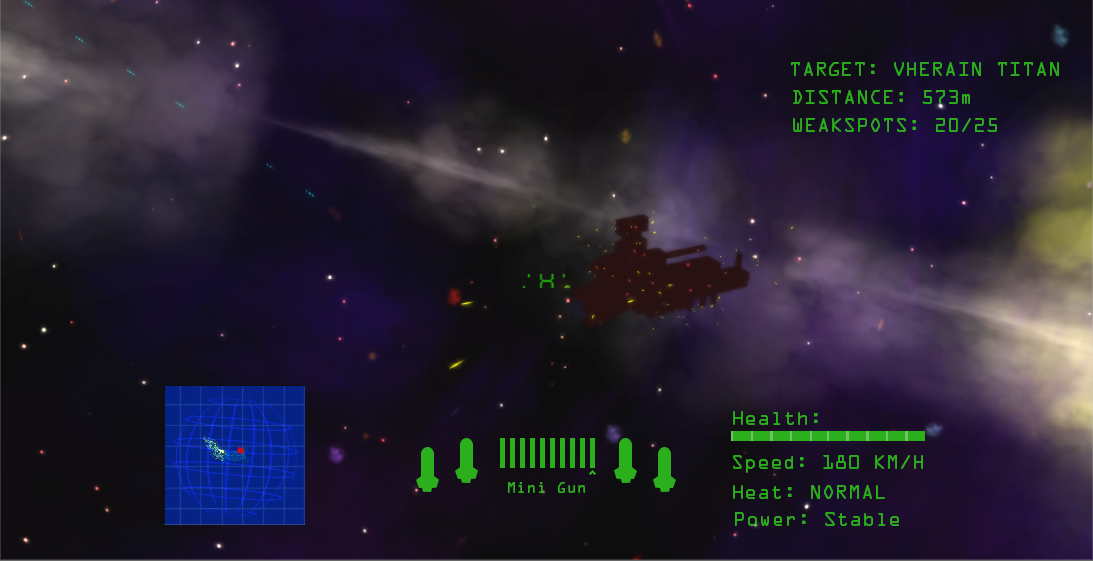
<style>
.page{position:relative;width:1093px;height:561px}
.page>*{position:absolute;margin:0}
.t1{font:18px "OCRAStd";color:#2caf1c}
.t2{font:14px "OCRAStd";color:#2caf1c}
</style>
<div class="page">
<p class="t1" style="left:791px;top:62px;width:268px;height:14px">TARGET: VHERAIN TITAN</p>
<p class="t1" style="left:793px;top:90px;width:177px;height:14px">DISTANCE: 573m</p>
<p class="t1" style="left:793px;top:118px;width:204px;height:14px">WEAKSPOTS: 20/25</p>
<p class="t1" style="left:733px;top:411px;width:85px;height:14px">Health:</p>
<p class="t1" style="left:733px;top:455px;width:190px;height:18px">Speed: 180 KM/H</p>
<p class="t2" style="left:508px;top:482px;width:77px;height:11px">Mini Gun</p>
<p class="t1" style="left:733px;top:485px;width:152px;height:14px">Heat: NORMAL</p>
<p class="t1" style="left:735px;top:512px;width:164px;height:14px">Power: Stable</p>
</div>
